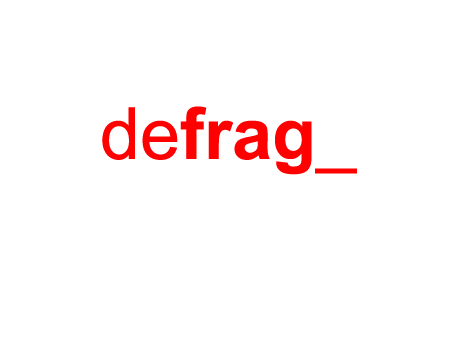
<style>
.page{position:relative;width:454px;height:340px;background:#ffffff}
.page>*{position:absolute;margin:0}
.t1{font:72px "Arial-BoldMT";color:#ff0000}
.t2{font:72px "ArialMT";color:#ff0000}
</style>
<div class="page">
<p class="t1" style="left:102px;top:106px;width:255px;height:69px"><span class="t2">de</span>frag<span class="t2">_</span></p>
</div>
